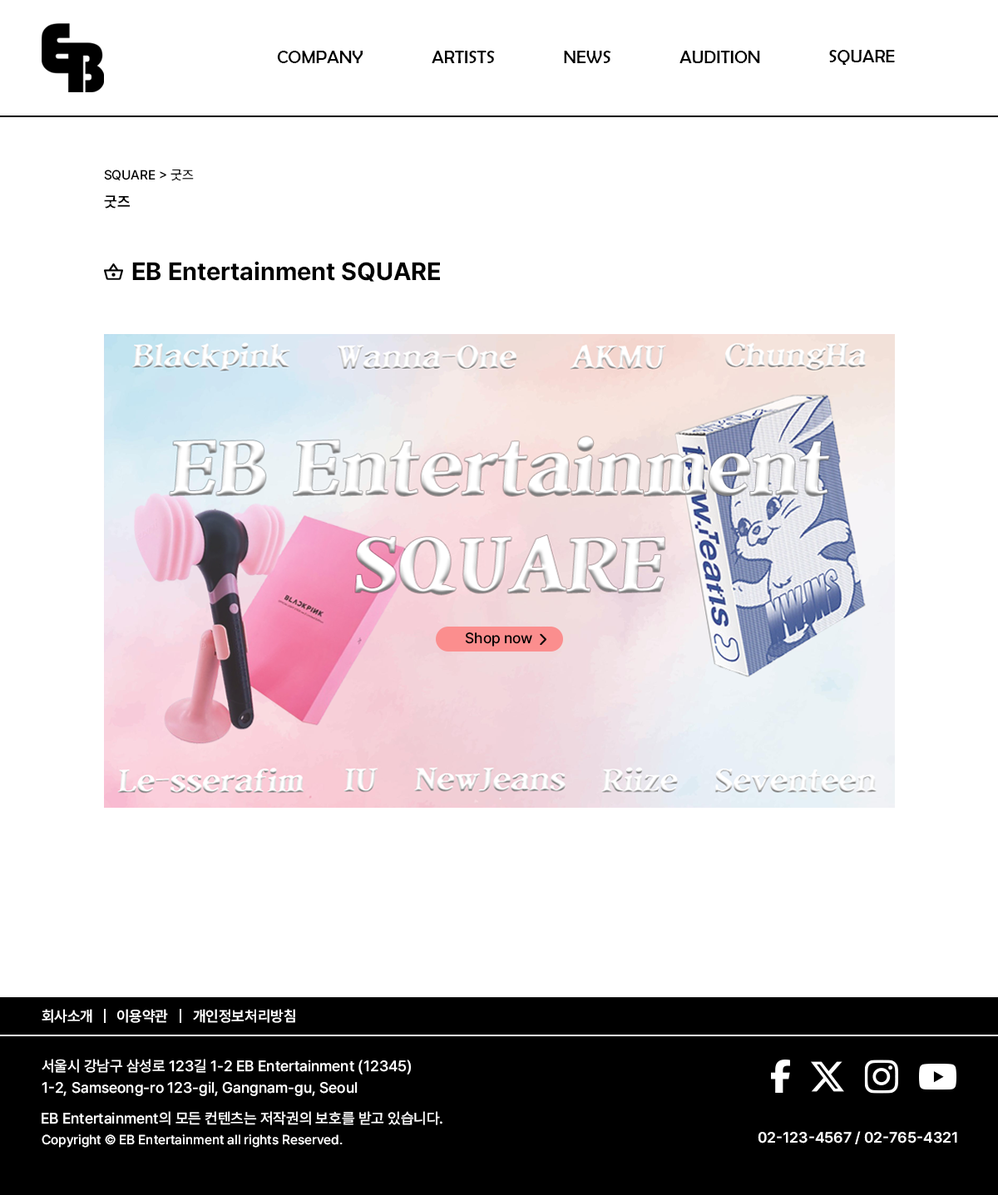
<style>
.page{position:relative;width:998px;height:1195px;background:#ffffff}
.page>*{position:absolute;margin:0}
.t1{font:18.3px "BerlinSansFB-Reg";color:#000000}
.t2{font:13.3px "Pretendard-Medium";color:#000000}
.t3{font:15px "Pretendard-Bold";color:#000000}
.t4{font:24.9px "Pretendard-Bold";color:#000000}
.t5{font:15px "Pretendard-Medium";color:#000000}
.t6{font:15px "Pretendard-SemiBold";color:#ffffff}
.t7{font:15px/21.6px "Pretendard-Medium";color:#ffffff}
.t8{font:15px "Pretendard-Medium";color:#ffffff}
.t9{font:13.3px "Pretendard-Medium";color:#ffffff}
</style>
<div class="page">
<p class="t1" style="left:277px;top:51px;width:85px;height:12px">COMPANY</p>
<p class="t1" style="left:431px;top:51px;width:64px;height:12px">ARTISTS</p>
<p class="t1" style="left:564px;top:51px;width:47px;height:12px">NEWS</p>
<p class="t1" style="left:679px;top:51px;width:81px;height:12px">AUDITION</p>
<p class="t1" style="left:829px;top:50px;width:65px;height:15px">SQUARE</p>
<p class="t2" style="left:104px;top:170px;width:90px;height:11px">SQUARE &gt; 굿즈</p>
<p class="t3" style="left:104px;top:195px;width:26px;height:14px">굿즈</p>
<p class="t4" style="left:132px;top:261px;width:308px;height:21px">EB Entertainment SQUARE</p>
<p class="t5" style="left:465px;top:633px;width:67px;height:14px">Shop now</p>
<p class="t6" style="left:42px;top:1009px;width:50px;height:14px">회사소개</p>
<p class="t6" style="left:117px;top:1009px;width:51px;height:14px">이용약관</p>
<p class="t6" style="left:193px;top:1009px;width:102px;height:14px">개인정보처리방침</p>
<p class="t7" style="left:42px;top:1059px;width:369px;height:37px">서울시 강남구 삼성로 123길 1-2 EB Entertainment (12345)<br>1-2, Samseong-ro 123-gil, Gangnam-gu, Seoul</p>
<p class="t8" style="left:42px;top:1111px;width:400px;height:15px">EB Entertainment의 모든 컨텐츠는 저작권의 보호를 받고 있습니다.</p>
<p class="t6" style="left:757px;top:1131px;width:200px;height:14px">02-123-4567 / 02-765-4321</p>
<p class="t9" style="left:42px;top:1135px;width:300px;height:13px">Copyright © EB Entertainment all rights Reserved.</p>
</div>
